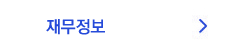
<style>
.page{position:relative;width:230px;height:52px;background:#ffffff}
.page>*{position:absolute;margin:0}
.t1{font:17px "KoPubDotumBold";color:#254ad9}
</style>
<div class="page">
<p class="t1" style="left:46px;top:19px;width:59px;height:16px">재무정보</p>
</div>
